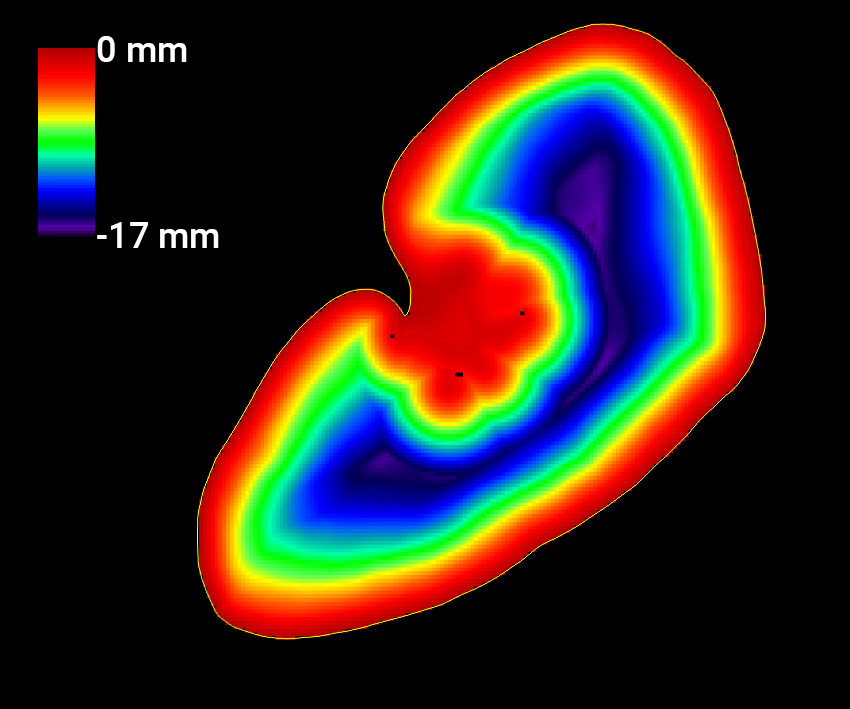
<style>
.page{position:relative;width:850px;height:709px;background:#000000}
.page>*{position:absolute;margin:0}
.t1{font:36px "Roboto-Medium";color:#ffffff}
</style>
<div class="page">
<p class="t1" style="left:97px;top:36px;width:90px;height:26px">0 mm</p>
<p class="t1" style="left:97px;top:222px;width:122px;height:26px">-17 mm</p>
</div>
